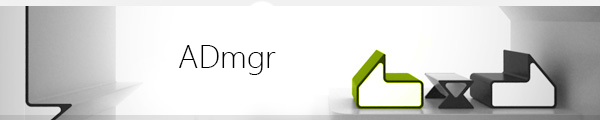
<style>
.page{position:relative;width:600px;height:120px;background:#ffffff}
.page>*{position:absolute;margin:0}
.t1{font:30px "MicrosoftYaHeiUILight";color:#000000}
</style>
<div class="page">
<p class="t1" style="left:179px;top:45px;width:97px;height:30px">ADmgr</p>
</div>
